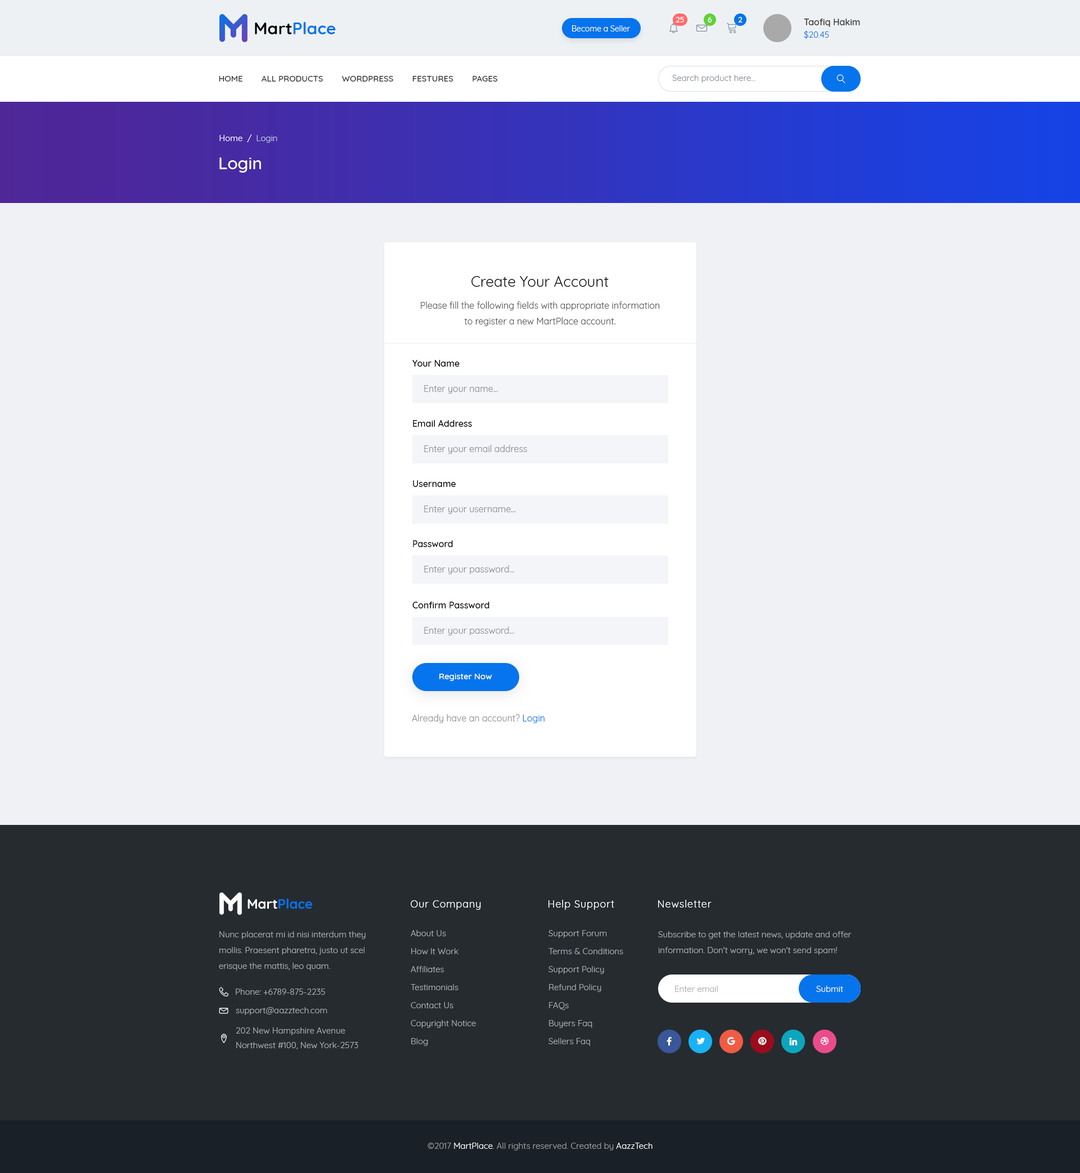
<style>
.page{position:relative;width:1080px;height:1173px;background:#eff1f5}
.page>*{position:absolute;margin:0}
.t1{font:7.9px "Quicksand-Medium";color:#ffffff;text-transform:uppercase}
.t2{font:16.9px "Quicksand-Bold";color:#0674ec}
.t3{font:16.9px "Quicksand-Bold";color:#000000}
.t4{font:7.9px "Quicksand-Regular";color:#ffffff}
.t5{font:9px/12.4px "Quicksand-Medium";color:#333333}
.t6{font:8.4px/12.4px "Quicksand-Regular";color:#0674ec}
.t7{font:8.4px "Quicksand-Medium";color:#333333;text-transform:uppercase}
.t8{font:8.4px "Quicksand-Regular";color:#898f96}
.t9{font:8.4px "Quicksand-Regular";color:#ffffff}
.t10{font:8.4px "Quicksand-Regular";color:#bfcad7}
.t11{font:16.9px "Quicksand-Medium";color:#ffffff}
.t12{font:14.6px "Quicksand-Regular";color:#000000}
.t13{font:9px/15.8px "Quicksand-Regular";color:#555555}
.t14{font:9px "Quicksand-Medium";color:#000000}
.t15{font:9px "Quicksand-Regular";color:#898f96}
.t16{font:8.4px "Quicksand-Medium";color:#ffffff}
.t17{font:9px "Quicksand-Regular";color:#0674ec}
.t18{font:13.5px "Quicksand-Bold";color:#0674ec}
.t19{font:13.5px "Quicksand-Bold";color:#ffffff}
.t20{font:10.1px "Quicksand-Regular";letter-spacing:0.05em;color:#ffffff}
.t21{font:8.4px/15.8px "Quicksand-Regular";color:#ababab}
.t22{font:8.4px/18px "Quicksand-Regular";color:#ababab}
.t23{font:8.4px "Quicksand-Regular";color:#ababab}
.t24{font:8.4px/14.6px "Quicksand-Regular";color:#ababab}
.t25{font:8.4px "Quicksand-Regular";color:#999999}
</style>
<div class="page">
<p class="t1" style="left:676px;top:17px;width:8px;height:5px">25</p>
<p class="t1" style="left:708px;top:17px;width:4px;height:5px">6</p>
<p class="t1" style="left:738px;top:17px;width:4px;height:5px">2</p>
<p class="t2" style="left:255px;top:22px;width:81px;height:12px"><span class="t3">Mart</span>Place</p>
<p class="t4" style="left:572px;top:25px;width:59px;height:7px">Become a Seller</p>
<p class="t5" style="left:804px;top:19px;width:56px;height:20px">Taofiq Hakim<br><span class="t6">$20.45</span></p>
<p class="t7" style="left:219px;top:76px;width:279px;height:6px">HOME        all products        wordpress        festures        Pages</p>
<p class="t8" style="left:672px;top:75px;width:83px;height:8px">Search product here...</p>
<p class="t9" style="left:219px;top:134px;width:58px;height:9px">Home  /  <span class="t10">Login</span></p>
<p class="t11" style="left:219px;top:158px;width:42px;height:15px">Login</p>
<p class="t12" style="left:471px;top:276px;width:138px;height:11px">Create Your Account</p>
<p class="t13" style="left:421px;top:302px;width:239px;height:24px;text-align:center">Please fill the following fields with appropriate information<br>to register a new MartPlace account.</p>
<p class="t14" style="left:412px;top:360px;width:48px;height:7px">Your Name</p>
<p class="t15" style="left:424px;top:385px;width:74px;height:9px">Enter your name...</p>
<p class="t14" style="left:413px;top:420px;width:59px;height:7px">Email Address</p>
<p class="t15" style="left:424px;top:445px;width:103px;height:9px">Enter your email address</p>
<p class="t14" style="left:413px;top:480px;width:43px;height:7px">Username</p>
<p class="t15" style="left:424px;top:506px;width:92px;height:8px">Enter your username...</p>
<p class="t14" style="left:413px;top:541px;width:40px;height:6px">Password</p>
<p class="t15" style="left:424px;top:565px;width:90px;height:9px">Enter your password...</p>
<p class="t14" style="left:412px;top:602px;width:77px;height:7px">Confirm Password</p>
<p class="t15" style="left:424px;top:627px;width:90px;height:9px">Enter your password...</p>
<p class="t16" style="left:439px;top:674px;width:53px;height:7px">Register Now</p>
<p class="t15" style="left:412px;top:714px;width:132px;height:9px">Already have an account? <span class="t17">Login</span></p>
<p class="t18" style="left:248px;top:899px;width:65px;height:10px"><span class="t19">Mart</span>Place</p>
<p class="t20" style="left:411px;top:901px;width:70px;height:9px">Our Company</p>
<p class="t20" style="left:548px;top:900px;width:66px;height:10px">Help Support</p>
<p class="t20" style="left:658px;top:900px;width:54px;height:8px">Newsletter</p>
<p class="t21" style="left:219px;top:932px;width:147px;height:39px">Nunc placerat mi id nisi interdum they mollis. Praesent pharetra, justo ut scel erisque the mattis, leo quam.</p>
<p class="t22" style="left:411px;top:930px;width:65px;height:116px">About Us<br>How It Work<br>Affiliates<br>Testimonials<br>Contact Us<br>Copyright Notice<br>Blog</p>
<p class="t22" style="left:548px;top:930px;width:75px;height:116px">Support Forum<br>Terms &amp; Conditions<br>Support Policy<br>Refund Policy<br>FAQs<br>Buyers Faq<br>Sellers Faq</p>
<p class="t21" style="left:658px;top:932px;width:194px;height:23px">Subscribe to get the latest news, update and offer information. Don't worry, we won't send spam!</p>
<p class="t23" style="left:236px;top:989px;width:89px;height:6px">Phone: +6789-875-2235</p>
<p class="t23" style="left:675px;top:986px;width:43px;height:6px">Enter email</p>
<p class="t9" style="left:816px;top:986px;width:27px;height:6px">Submit</p>
<p class="t23" style="left:236px;top:1007px;width:91px;height:8px">support@aazztech.com</p>
<p class="t24" style="left:236px;top:1028px;width:122px;height:22px">202 New Hampshire Avenue<br>Northwest #100, New York-2573</p>
<p class="t25" style="left:428px;top:1143px;width:224px;height:8px">©2017 <span class="t9">MartPlace</span>. All rights reserved. Created by <span class="t9">AazzTech</span></p>
</div>
